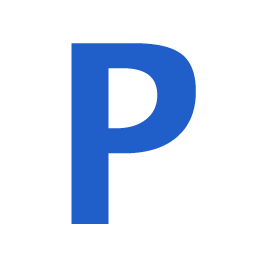
<style>
.page{position:relative;width:260px;height:260px;background:#ffffff}
.page>*{position:absolute;margin:0}
.t1{font:250px "LucidaGrande-Bold";color:#205ec9}
</style>
<div class="page">
<p class="t1" style="left:71px;top:43px;width:125px;height:181px">P</p>
</div>
